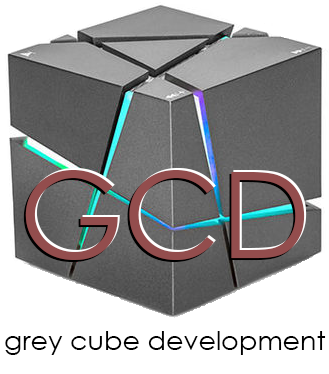
<style>
.page{position:relative;width:329px;height:374px;background:#ffffff}
.page>*{position:absolute;margin:0}
.t1{font:120px "CenturyGothic";color:#934d4d}
.t2{font:27px "CenturyGothic";color:#000000}
</style>
<div class="page">
<p class="t1" style="left:23px;top:172px;width:280px;height:90px">GCD</p>
<p class="t1" style="left:25px;top:170px;width:280px;height:90px">GCD</p>
<p class="t1" style="left:27px;top:168px;width:280px;height:90px">GCD</p>
<p class="t2" style="left:5px;top:331px;width:321px;height:24px">grey cube development</p>
</div>
